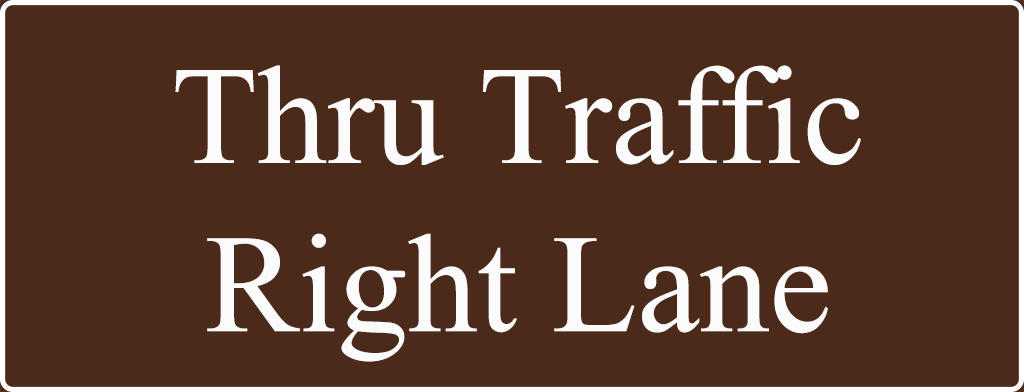
<style>
.page{position:relative;width:1024px;height:392px;background:#4c2a19}
.page>*{position:absolute;margin:0}
.t1{font:140.1px "IskoolaPota";color:#fbfbfb}
</style>
<div class="page">
<p class="t1" style="left:175px;top:65px;width:686px;height:297px;text-align:center">Thru Traffic<br>Right Lane</p>
</div>
